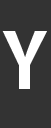
<style>
.page{position:relative;width:51px;height:128px;background:#333333}
.page>*{position:absolute;margin:0}
.t1{font:75px "AdobeGothicStd-Bold";color:#ffffff}
</style>
<div class="page">
<p class="t1" style="left:2px;top:31px;width:45px;height:58px">Y</p>
</div>
